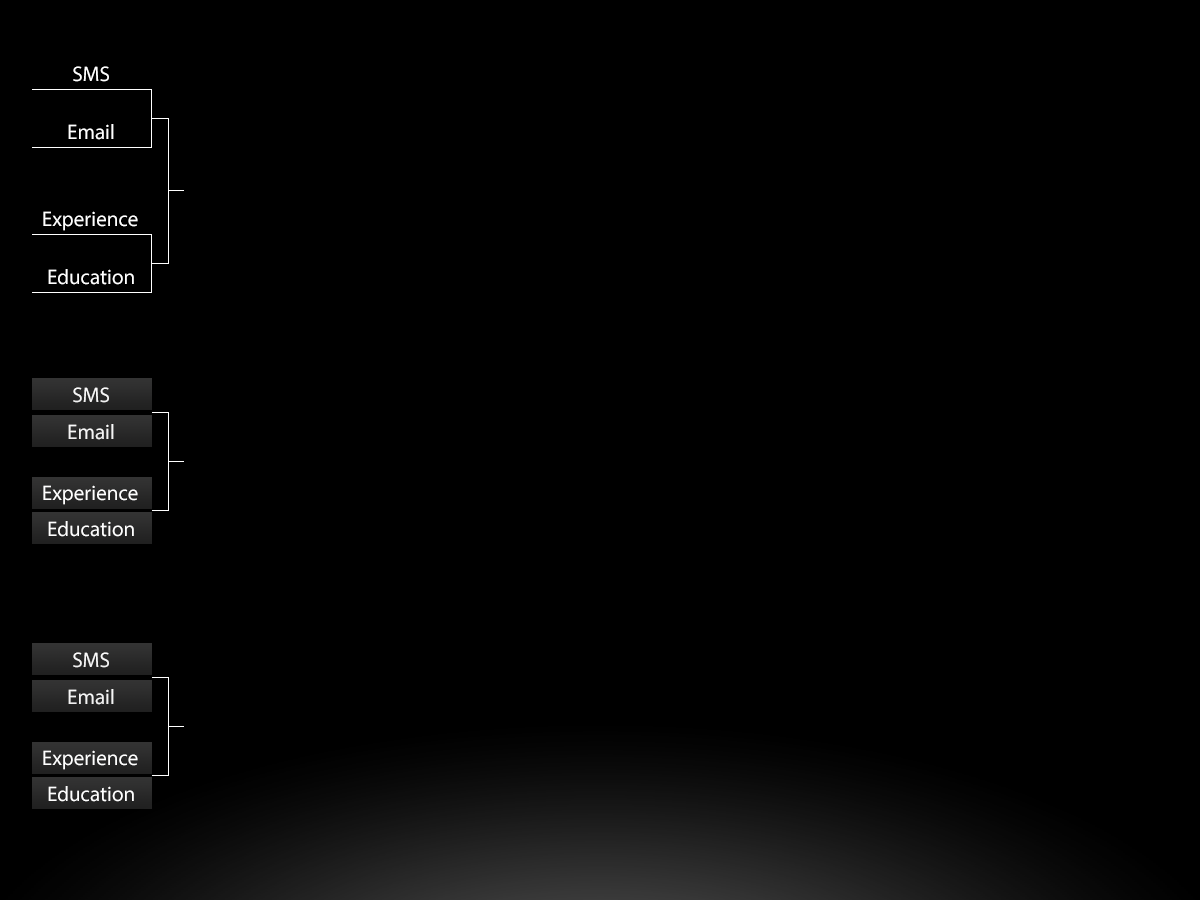
<style>
.page{position:relative;width:1200px;height:900px;background:#000000}
.page>*{position:absolute;margin:0}
.t1{font:21px "MyriadPro-Regular";color:#ffffff}
</style>
<div class="page">
<p class="t1" style="left:73px;top:66px;width:36px;height:16px">SMS</p>
<p class="t1" style="left:68px;top:124px;width:46px;height:16px">Email</p>
<p class="t1" style="left:43px;top:211px;width:95px;height:20px">Experience</p>
<p class="t1" style="left:48px;top:269px;width:86px;height:16px">Education</p>
<p class="t1" style="left:73px;top:387px;width:36px;height:16px">SMS</p>
<p class="t1" style="left:68px;top:424px;width:46px;height:16px">Email</p>
<p class="t1" style="left:43px;top:485px;width:95px;height:20px">Experience</p>
<p class="t1" style="left:48px;top:521px;width:86px;height:16px">Education</p>
<p class="t1" style="left:73px;top:652px;width:36px;height:16px">SMS</p>
<p class="t1" style="left:68px;top:689px;width:46px;height:16px">Email</p>
<p class="t1" style="left:43px;top:750px;width:95px;height:20px">Experience</p>
<p class="t1" style="left:48px;top:786px;width:86px;height:16px">Education</p>
</div>
